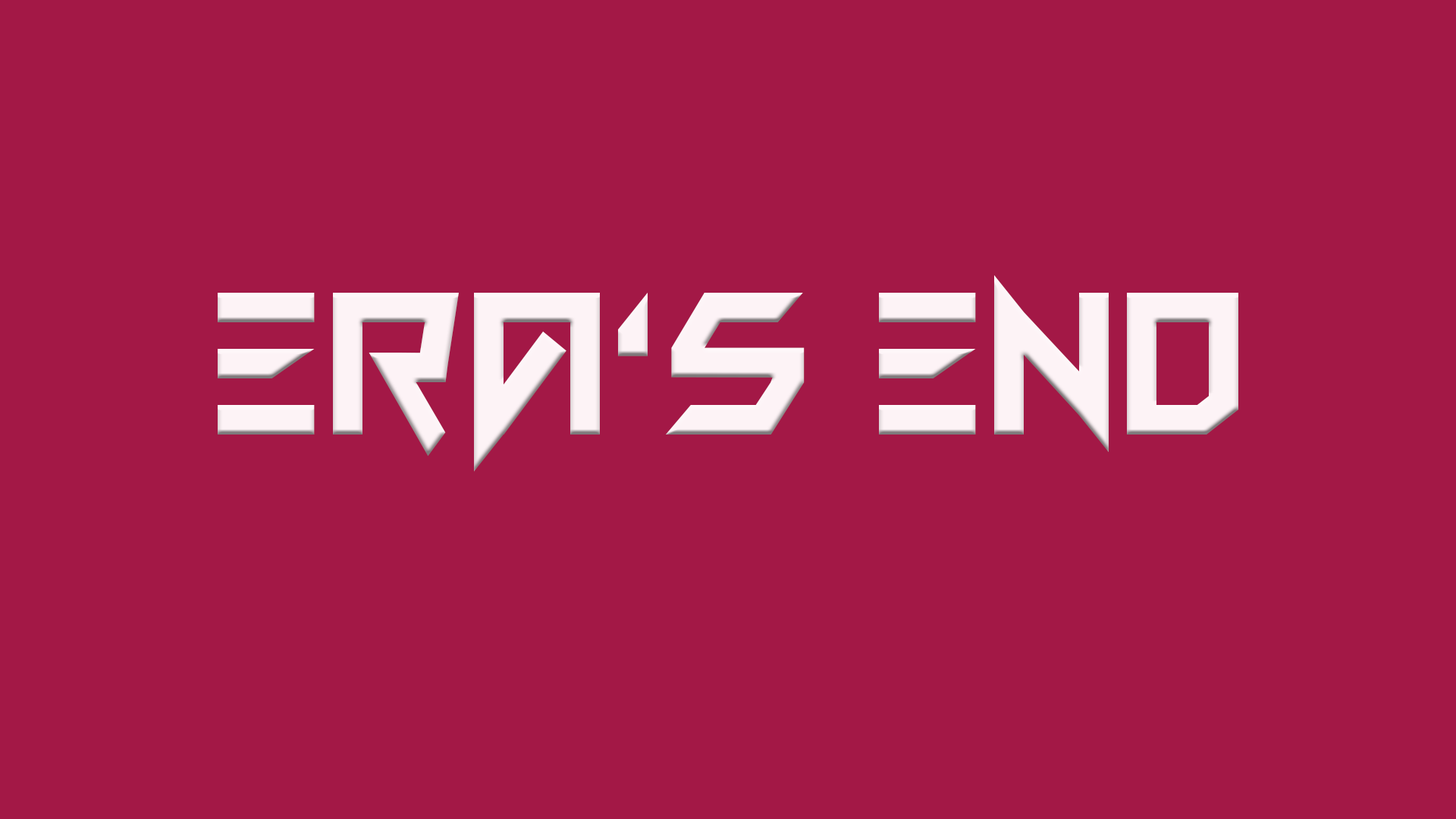
<style>
.page{position:relative;width:1456px;height:819px;background:#a31846}
.page>*{position:absolute;margin:0}
.t1{font:227.5px "FUNGAMES";color:#fdf3f6}
</style>
<div class="page">
<p class="t1" style="left:218px;top:275px;width:1020px;height:197px">Era’s end</p>
</div>
